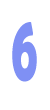
<style>
.page{position:relative;width:50px;height:110px;background:#ffffff}
.page>*{position:absolute;margin:0}
.t1{font:96px "BerlinSansFBDemi-Bold";color:#7f90f4;scale:0.5 1}
</style>
<div class="page">
<p class="t1" style="left:12px;top:22px;width:25px;height:60px">6</p>
</div>
